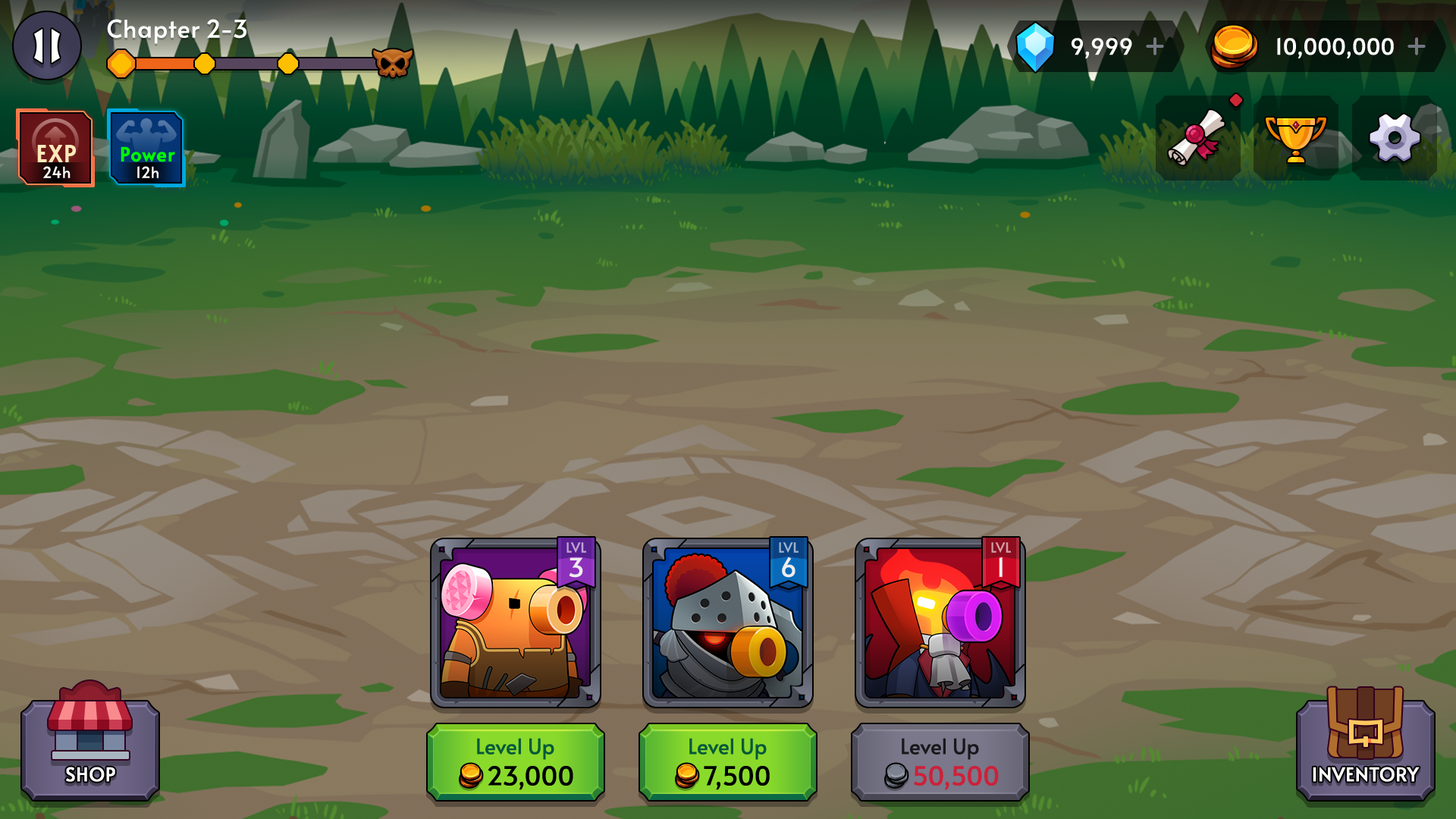
<style>
.page{position:relative;width:1456px;height:819px}
.page>*{position:absolute;margin:0}
.t1{font:24.3px "Alata-Regular";color:#ffffff}
.t2{font:21.9px "Alata-Regular";letter-spacing:-0.025em;color:#ffffff;font-weight:bold}
.t3{font:22.7px "Alata-Regular";color:#ffe9ba;font-weight:bold}
.t4{font:19px "Alata-Regular";color:#00ff00;font-weight:bold}
.t5{font:15.2px "Alata-Regular";color:#ffffff}
.t6{font:13.6px "Alata-Regular";letter-spacing:-0.01em;color:#bda5d3;text-transform:uppercase}
.t7{font:13.6px "Alata-Regular";letter-spacing:-0.01em;color:#9db3cd;text-transform:uppercase}
.t8{font:13.6px "Alata-Regular";letter-spacing:-0.01em;color:#d19ea5;text-transform:uppercase}
.t9{font:25.8px "Alata-Regular";letter-spacing:-0.01em;color:#eeeced;text-transform:uppercase}
.t10{font:21.2px "Alata-Regular";color:#045a39}
.t11{font:21.2px "Alata-Regular";color:#18181c}
.t12{font:19px "Alata-Regular";color:#ffffff;text-transform:uppercase;font-weight:bold}
.t13{font:25.8px "Alata-Regular";color:#000000}
.t14{font:25.8px "Alata-Regular";color:#cc2139}
</style>
<div class="page">
<p class="t1" style="left:107px;top:19px;width:139px;height:25px">Chapter 2-3</p>
<p class="t2" style="left:1072px;top:38px;width:60px;height:20px">9,999</p>
<p class="t2" style="left:1277px;top:37px;width:117px;height:21px">10,000,000</p>
<p class="t3" style="left:37px;top:145px;width:39px;height:17px">EXP</p>
<p class="t4" style="left:121px;top:146px;width:54px;height:16px">Power</p>
<p class="t5" style="left:43px;top:166px;width:28px;height:12px">24h</p>
<p class="t5" style="left:137px;top:166px;width:21px;height:12px">12h</p>
<p class="t6" style="left:566px;top:542px;width:20px;height:11px">lvl</p>
<p class="t7" style="left:779px;top:542px;width:20px;height:11px">lvl</p>
<p class="t8" style="left:991px;top:542px;width:20px;height:11px">lvl</p>
<p class="t9" style="left:569px;top:557px;width:14px;height:21px">3</p>
<p class="t9" style="left:782px;top:557px;width:13px;height:21px">6</p>
<p class="t9" style="left:999px;top:557px;width:4px;height:20px">1</p>
<p class="t10" style="left:477px;top:738px;width:77px;height:22px">Level Up</p>
<p class="t10" style="left:689px;top:738px;width:78px;height:22px">Level Up</p>
<p class="t11" style="left:902px;top:738px;width:77px;height:22px">Level Up</p>
<p class="t12" style="left:66px;top:767px;width:49px;height:15px">Shop</p>
<p class="t13" style="left:488px;top:766px;width:85px;height:24px">23,000</p>
<p class="t13" style="left:704px;top:766px;width:66px;height:24px">7,500</p>
<p class="t14" style="left:914px;top:766px;width:85px;height:24px">50,500</p>
<p class="t12" style="left:1313px;top:767px;width:107px;height:15px">Inventory</p>
</div>
